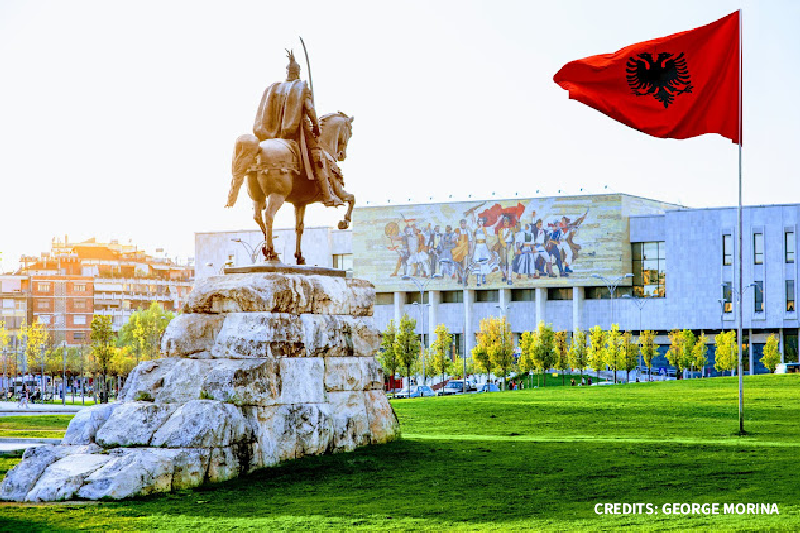
<style>
.page{position:relative;width:800px;height:533px;background:#f8f9fb}
.page>*{position:absolute;margin:0}
.t1{font:16px "SourceSans3Roman-Semibold";letter-spacing:0.004em;color:#ffffff;text-transform:uppercase}
</style>
<div class="page">
<p class="t1" style="left:594px;top:503px;width:185px;height:12px">credits: George morina</p>
</div>
